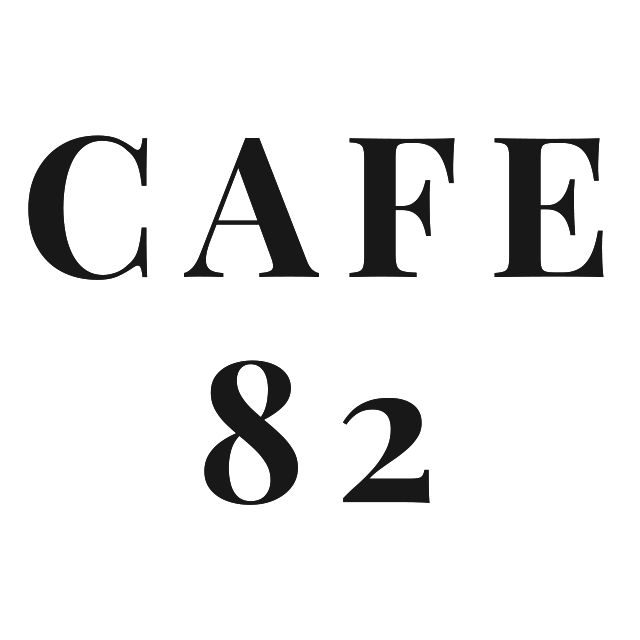
<style>
.page{position:relative;width:640px;height:640px;background:#ffffff}
.page>*{position:absolute;margin:0}
.t1{font:195.8px/225px "PlayfairDisplay-Bold";letter-spacing:0.15em;color:#181818}
</style>
<div class="page">
<p class="t1" style="left:28px;top:135px;width:576px;height:370px;text-align:center">CAFE<br>82</p>
</div>
